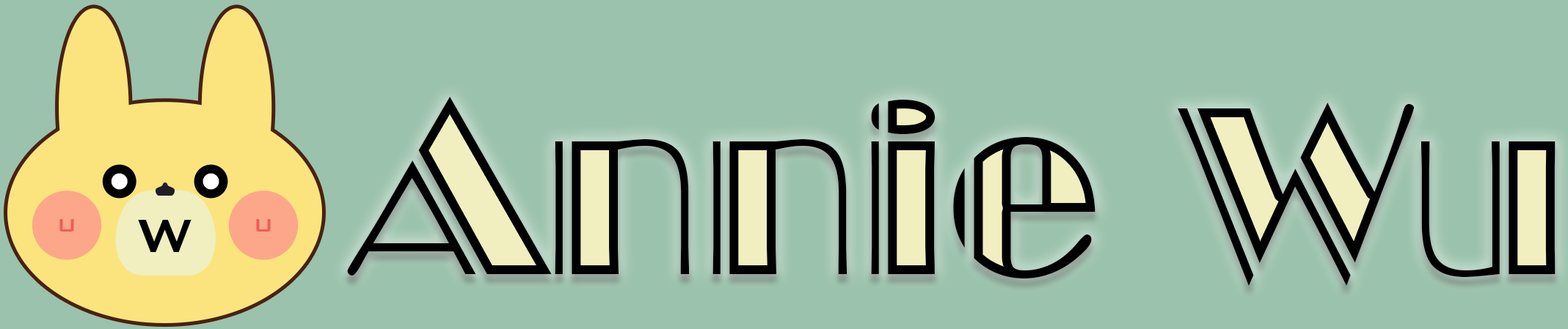
<style>
.page{position:relative;width:1568px;height:329px;background:#9bc2ac}
.page>*{position:absolute;margin:0}
.t1{font:234.9px "BroadwayEngravedBT-Regular"}
.t2{font:24.2px "BankGothicBT-Medium";color:#f05b5e}
.t3{font:62.5px "BankGothicBT-Medium";color:#000000}
</style>
<div class="page">
<p class="t1" style="left:347px;top:97px;width:1209px;height:189px">Annie Wu</p>
<p class="t2" style="left:59px;top:219px;width:15px;height:13px">U</p>
<p class="t3" style="left:138px;top:220px;width:54px;height:32px">W</p>
<p class="t2" style="left:256px;top:219px;width:15px;height:13px">U</p>
</div>
